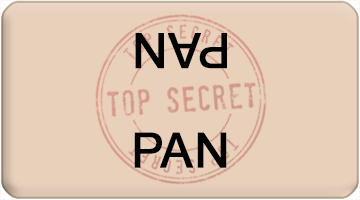
<style>
.page{position:relative;width:360px;height:200px;background:#e8d0bb}
.page>*{position:absolute;margin:0}
.t1{font:48px "ArialMT";color:#000000;font-weight:bold}
</style>
<div class="page">
<p class="t1" style="left:135px;top:33px;width:92px;height:36px;rotate:180deg">PAN</p>
<p class="t1" style="left:134px;top:132px;width:93px;height:36px">PAN</p>
</div>
